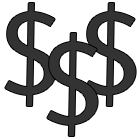
<style>
.page{position:relative;width:140px;height:140px;background:#ffffff}
.page>*{position:absolute;margin:0}
.t1{font:118px "Humanist531BT-RomanA";color:#333333}
</style>
<div class="page">
<p class="t1" style="left:5px;top:3px;width:51px;height:103px">$</p>
<p class="t1" style="left:85px;top:3px;width:51px;height:103px">$</p>
<p class="t1" style="left:47px;top:33px;width:51px;height:103px">$</p>
</div>
